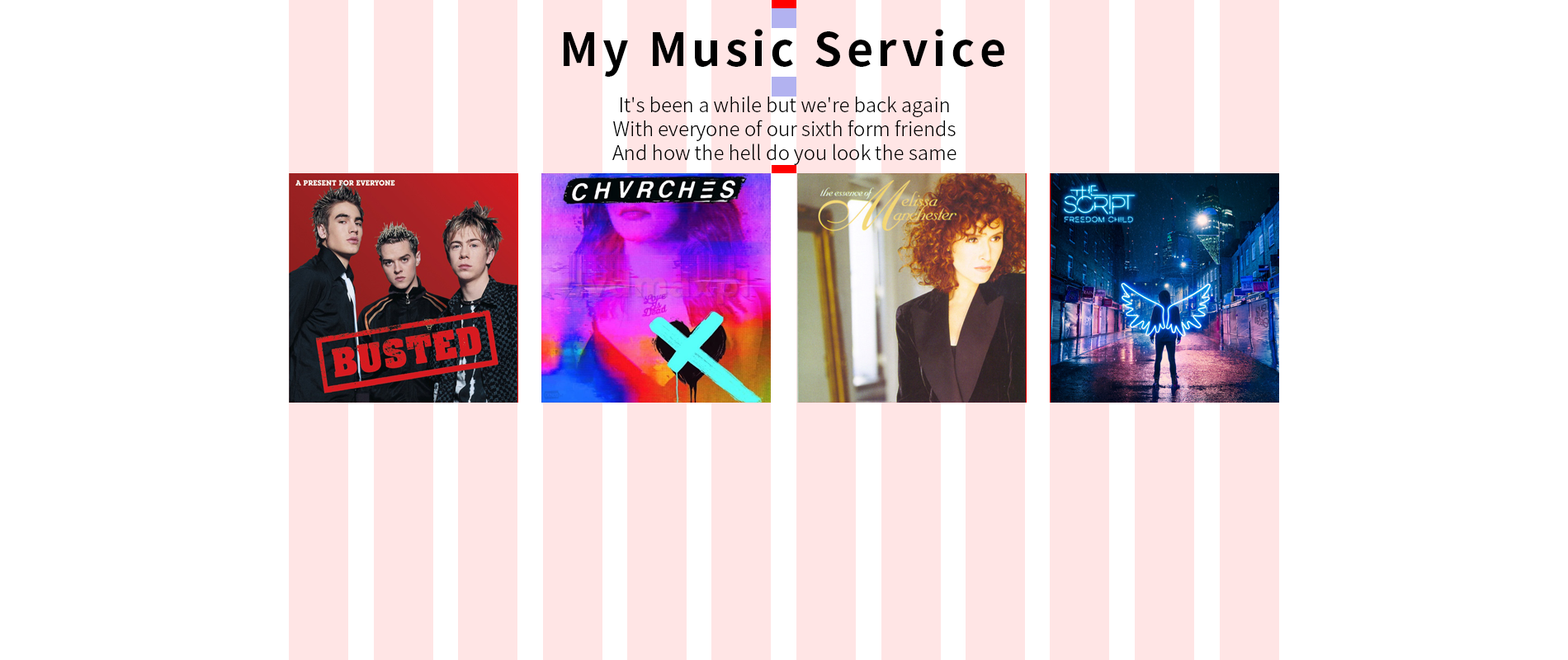
<style>
.page{position:relative;width:1568px;height:660px;background:#ffffff}
.page>*{position:absolute;margin:0}
.t1{font:45.4px "NotoSansKR-Bold";letter-spacing:0.1em;color:#000000}
.t2{font:19.8px "NotoSansKR-Light";color:#000000}
</style>
<div class="page">
<p class="t1" style="left:564px;top:29px;width:440px;height:48px">My Music Service</p>
<p class="t2" style="left:612px;top:96px;width:344px;height:69px;text-align:center">It's been a while but we're back again<br>With everyone of our sixth form friends<br>And how the hell do you look the same</p>
</div>
